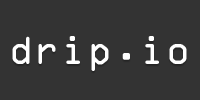
<style>
.page{position:relative;width:200px;height:100px;background:#333333}
.page>*{position:absolute;margin:0}
.t1{font:36.4px "OCRAStd";color:#ffffff}
</style>
<div class="page">
<p class="t1" style="left:12px;top:36px;width:175px;height:35px">drip.io</p>
</div>
